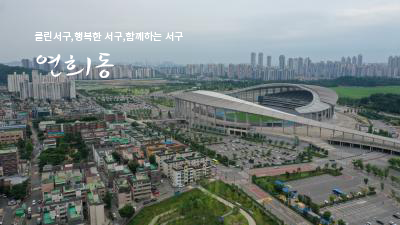
<style>
.page{position:relative;width:400px;height:225px}
.page>*{position:absolute;margin:0}
.t1{font:10px/16px "NotoSansKR-Regular";color:#ffffff}
.t2{font:30px/36px "Yj-NANCHO-Medium";color:#ffffff}
</style>
<div class="page">
<p class="t1" style="left:34px;top:31px;width:149px;height:47px">클린서구,행복한 서구,함께하는 서구<br><span class="t2">연희동</span></p>
</div>
